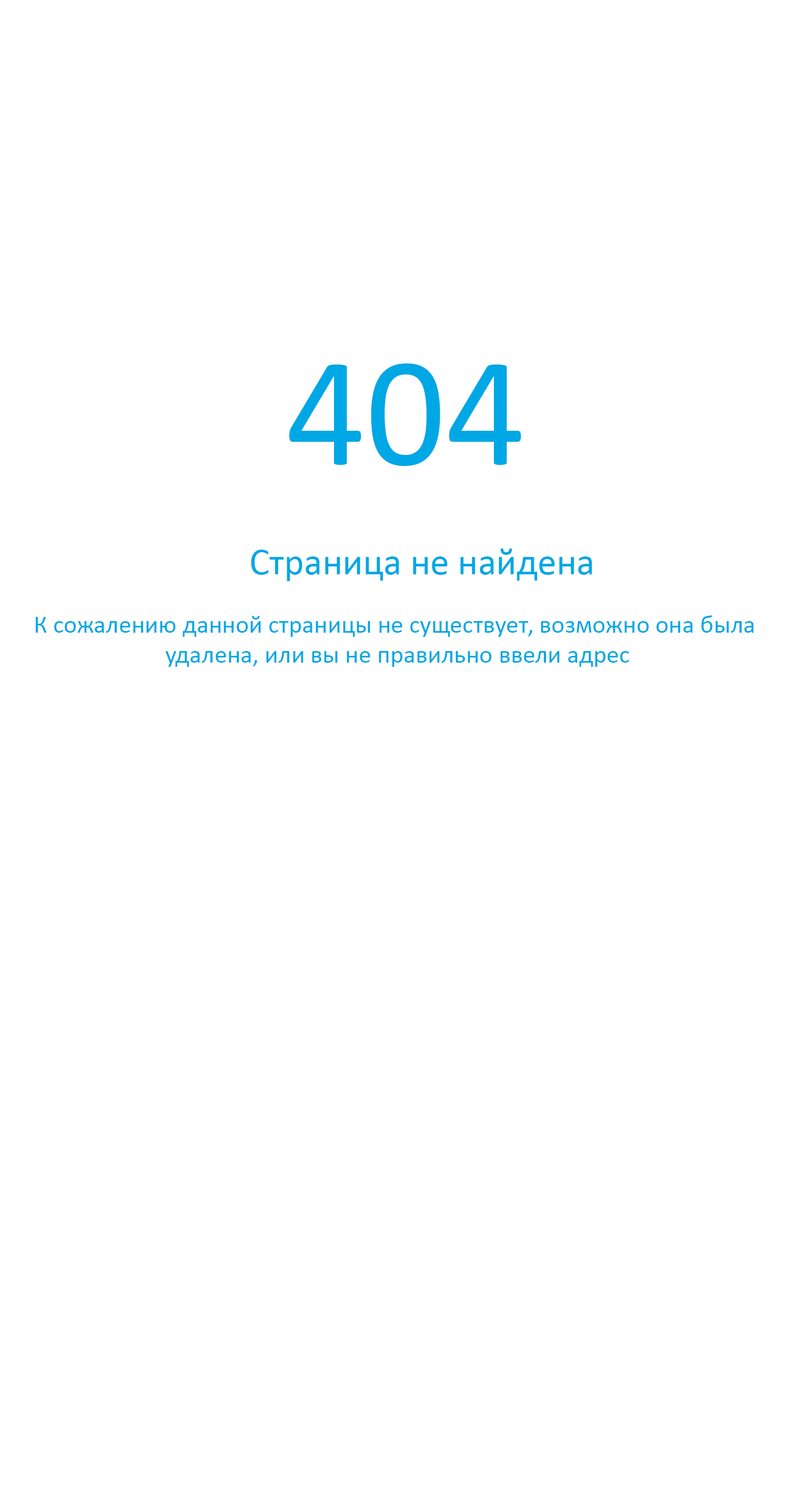
<style>
.page{position:relative;width:789px;height:1511px;background:#ffffff}
.page>*{position:absolute;margin:0}
.t1{font:157.8px "Calibri";color:#00a7e5}
.t2{font:37.9px "Calibri";color:#00a7e5}
.t3{font:25.2px "Calibri";color:#00a7e5}
</style>
<div class="page">
<p class="t1" style="left:289px;top:363px;width:232px;height:103px">404</p>
<p class="t2" style="left:251px;top:549px;width:341px;height:32px">Страница не найдена</p>
<p class="t3" style="left:36px;top:615px;width:718px;height:52px;text-align:center">К сожалению данной страницы не существует, возможно она была<br> удалена, или вы не правильно ввели адрес</p>
</div>
